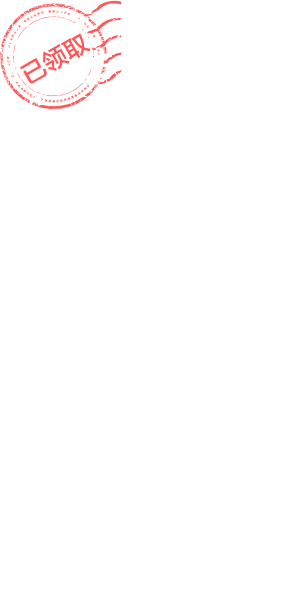
<style>
.page{position:relative;width:300px;height:600px;background:#ffffff}
.page>*{position:absolute;margin:0}
.t1{font:24.3px "FZLTZHK--GBK1-0";color:#ff5757}
</style>
<div class="page">
<p class="t1" style="left:20px;top:33px;width:70px;height:51px;rotate:-30deg">已领取</p>
</div>
